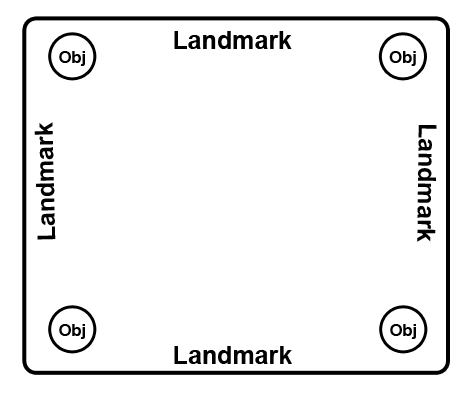
<style>
.page{position:relative;width:470px;height:398px;background:#ffffff}
.page>*{position:absolute;margin:0}
.t1{font:25px "Arial-BoldMT";color:#020202}
.t2{font:16.7px "Arial-BoldMT";color:#020202}
</style>
<div class="page">
<p class="t1" style="left:174px;top:31px;width:118px;height:18px">Landmark</p>
<p class="t2" style="left:59px;top:51px;width:26px;height:15px">Obj</p>
<p class="t2" style="left:389px;top:51px;width:27px;height:15px">Obj</p>
<p class="t1" style="left:34px;top:122px;width:22px;height:118px;rotate:-91deg">Landmark</p>
<p class="t1" style="left:417px;top:125px;width:20px;height:117px;rotate:91deg">Landmark</p>
<p class="t2" style="left:59px;top:324px;width:26px;height:15px">Obj</p>
<p class="t2" style="left:390px;top:324px;width:26px;height:15px">Obj</p>
<p class="t1" style="left:174px;top:346px;width:118px;height:18px">Landmark</p>
</div>
